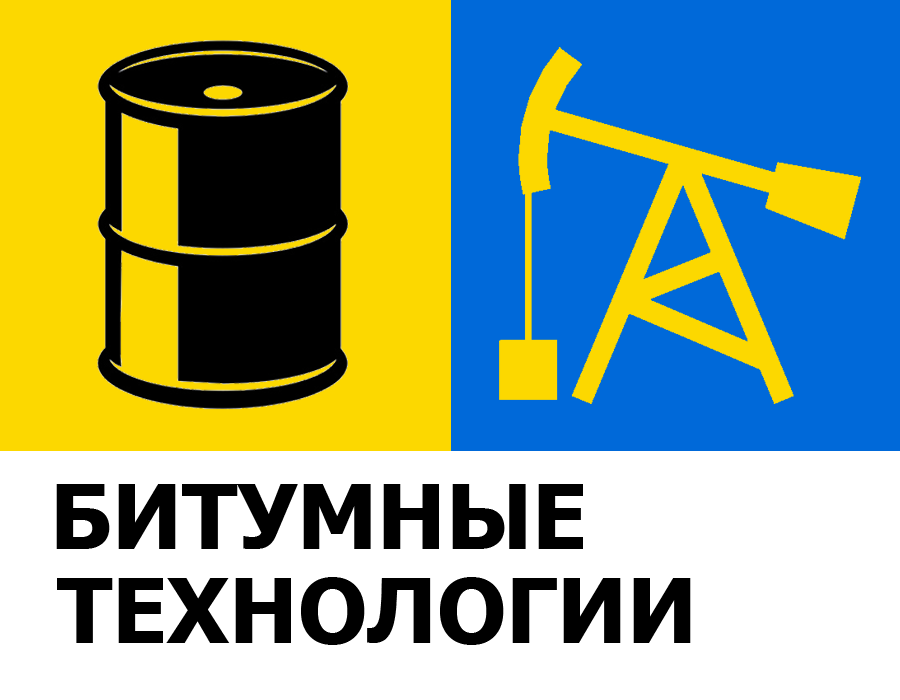
<style>
.page{position:relative;width:900px;height:700px;background:#ffffff}
.page>*{position:absolute;margin:0}
.t1{font:90px "Tahoma-Bold";color:#000000;text-transform:uppercase}
</style>
<div class="page">
<p class="t1" style="left:56px;top:484px;width:527px;height:65px">БИТУМНЫЕ</p>
<p class="t1" style="left:57px;top:577px;width:634px;height:68px">ТЕХНОЛОГИИ</p>
</div>
